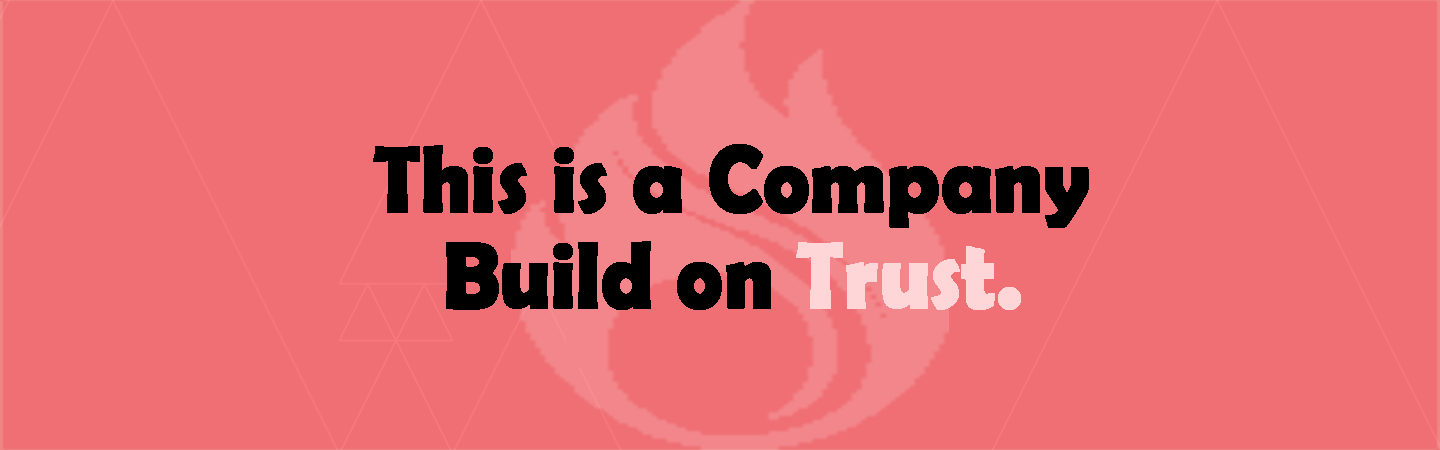
<style>
.page{position:relative;width:1440px;height:450px;background:#ef6f74}
.page>*{position:absolute;margin:0}
.t1{font:96px/96px "BerlinSansFBDemi-Bold";letter-spacing:-0.01em;color:#000000;font-weight:bold;scale:0.9 1}
.t2{font:96px/96px "BerlinSansFBDemi-Bold";letter-spacing:-0.01em;color:#ffd6d8;font-weight:bold;scale:0.9 1}
</style>
<div class="page">
<p class="t1" style="left:373px;top:144px;width:716px;height:166px;text-align:center">This is a Company<br>Build on <span class="t2">Trust.</span></p>
</div>
